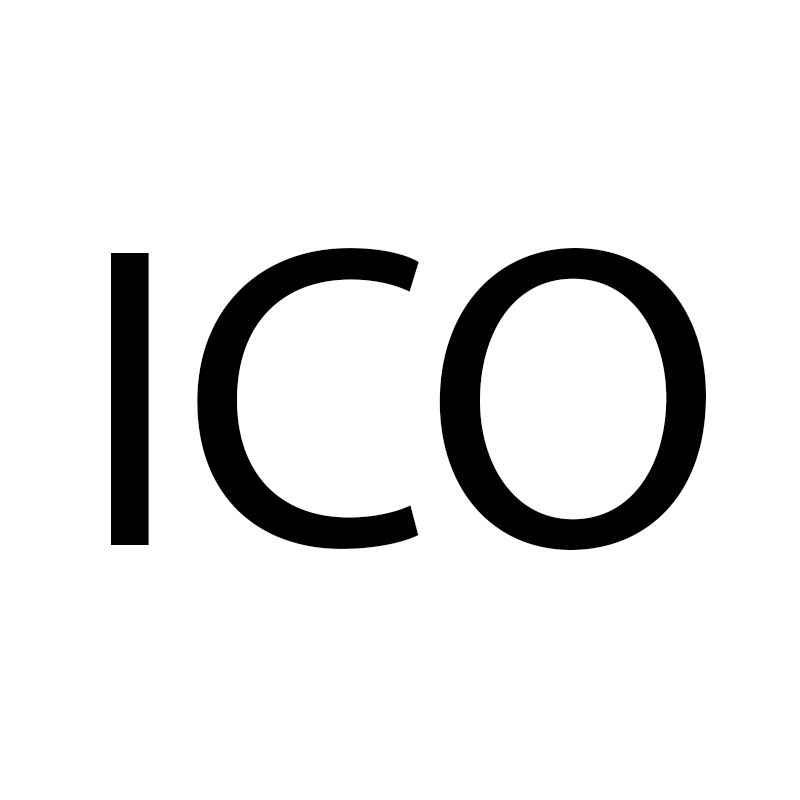
<style>
.page{position:relative;width:800px;height:800px;background:#ffffff}
.page>*{position:absolute;margin:0}
.t1{font:432.6px "MyriadPro-Regular";color:#000000}
</style>
<div class="page">
<p class="t1" style="left:111px;top:248px;width:595px;height:303px">ICO</p>
</div>
